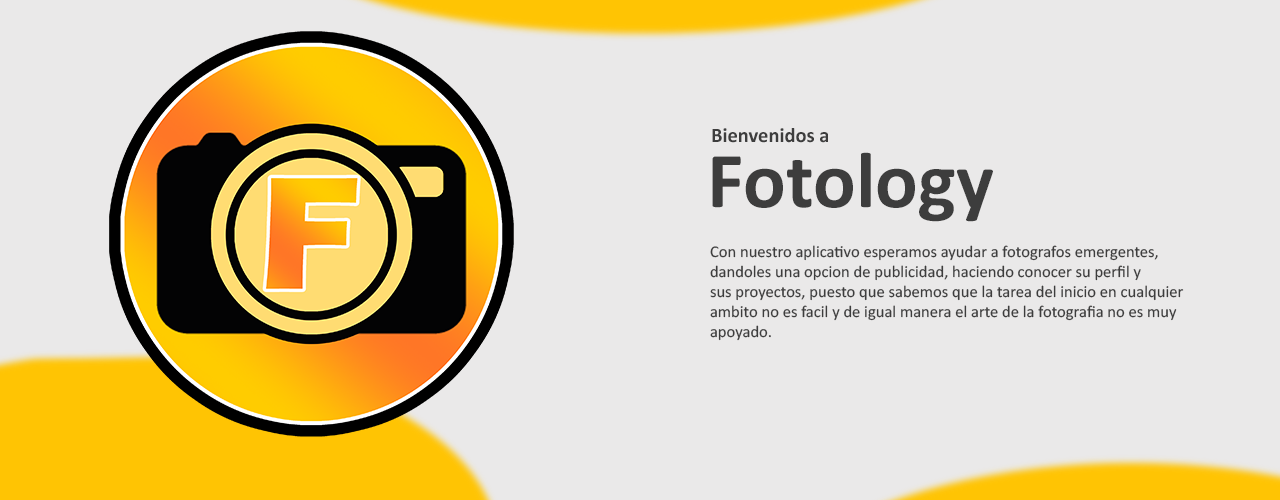
<style>
.page{position:relative;width:1280px;height:500px;background:#eae9e9}
.page>*{position:absolute;margin:0}
.t1{font:20.7px "Calibri-Bold";color:#3d3d3d}
.t2{font:79.9px "Calibri-Bold";color:#3d3d3d}
.t3{font:16.6px "Calibri";color:#3d3d3d}
</style>
<div class="page">
<p class="t1" style="left:712px;top:128px;width:116px;height:15px">Bienvenidos a</p>
<p class="t2" style="left:712px;top:152px;width:281px;height:70px">Fotology</p>
<p class="t3" style="left:710px;top:245px;width:474px;height:96px">Con nuestro aplicativo esperamos ayudar a fotografos emergentes,<br>dandoles una opcion de publicidad, haciendo conocer su perfil y<br>sus proyectos, puesto que sabemos que la tarea del inicio en cualquier<br>ambito no es facil y de igual manera el arte de la fotografia no es muy<br>apoyado.</p>
</div>
